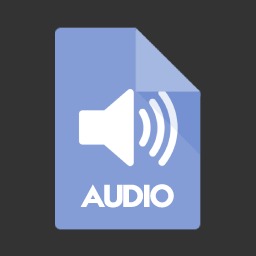
<style>
.page{position:relative;width:256px;height:256px;background:#333333}
.page>*{position:absolute;margin:0}
.t1{font:32.3px "TypoGraphica";color:#ffffff}
</style>
<div class="page">
<p class="t1" style="left:80px;top:184px;width:94px;height:24px">AUDIO</p>
</div>
